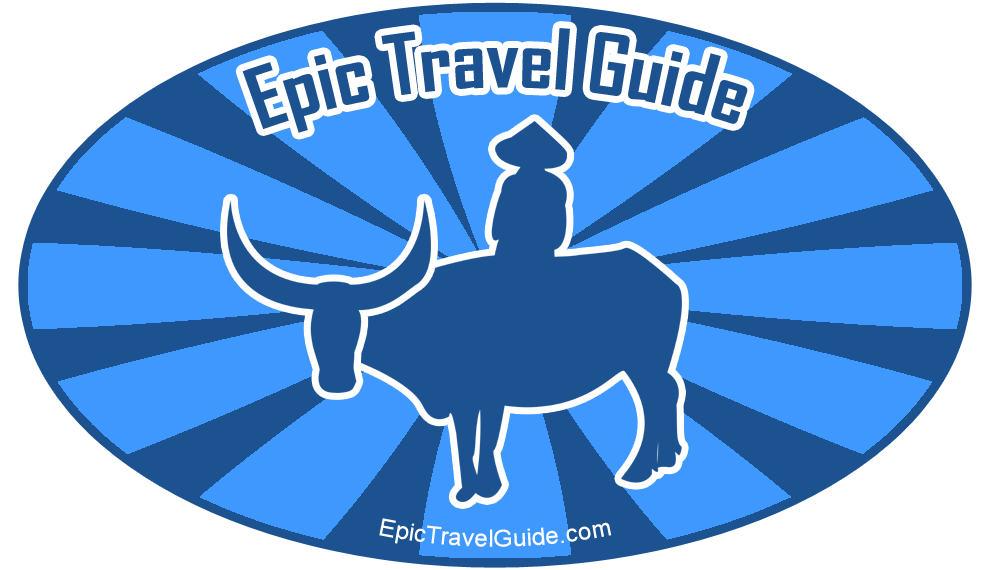
<style>
.page{position:relative;width:991px;height:570px;background:#3f98fd}
.page>*{position:absolute;margin:0}
.t1{font:80px "AgencyFB-Bold";color:#1c5290}
.t2{font:24px "ArialMT";color:#ffffff}
</style>
<div class="page">
<p class="t1" style="left:242px;top:28px;width:506px;height:105px">Epic Travel Guide</p>
<p class="t2" style="left:379px;top:518px;width:233px;height:29px">EpicTravelGuide.com</p>
</div>
